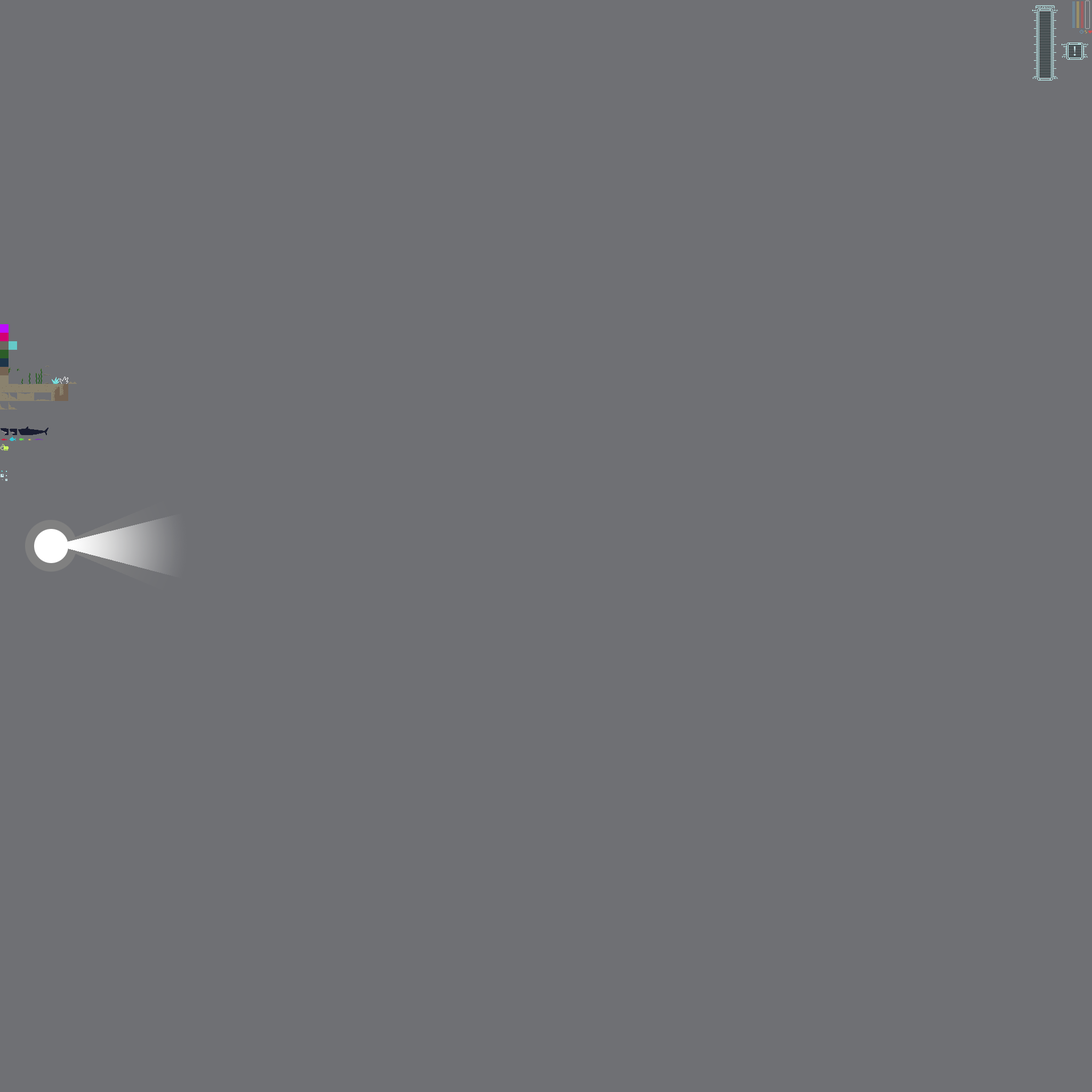
<style>
.page{position:relative;width:1092px;height:1092px;background:#6f7074}
.page>*{position:absolute;margin:0}
.t1{font:12.8px "Oxygen-Bold";letter-spacing:0.025em;color:#c5e3e7}
</style>
<div class="page">
<p class="t1" style="left:1073px;top:46px;width:3px;height:10px">!</p>
</div>
